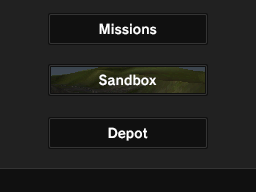
<style>
.page{position:relative;width:256px;height:192px;background:#212121}
.page>*{position:absolute;margin:0}
.t1{font:13px "RodinBokutohPro-B";color:#ffffff}
</style>
<div class="page">
<p class="t1" style="left:99px;top:23px;width:58px;height:12px">Missions</p>
<p class="t1" style="left:99px;top:74px;width:58px;height:12px">Sandbox</p>
<p class="t1" style="left:108px;top:127px;width:40px;height:14px">Depot</p>
</div>
